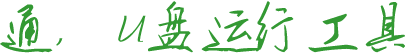
<style>
.page{position:relative;width:408px;height:54px;background:#ffffff}
.page>*{position:absolute;margin:0}
.t1{font:53.4px "Ò¶¸ùÓÑ¸Ö±ÊÐÐÊé¼òÌå";color:#339933}
</style>
<div class="page">
<p class="t1" style="left:0px;top:1px;width:405px;height:52px">通，　u盘运行工具</p>
</div>
